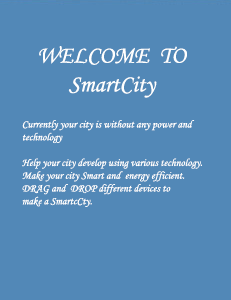
<style>
.page{position:relative;width:231px;height:300px;background:#5288b7}
.page>*{position:absolute;margin:0}
.t1{font:24px "MonotypeCorsiva";color:#fffffe}
.t2{font:10.7px "MonotypeCorsiva";color:#fffffe}
</style>
<div class="page">
<p class="t1" style="left:39px;top:46px;width:148px;height:52px">WELCOME  TO  <br>      SmartCity</p>
<p class="t2" style="left:22px;top:120px;width:180px;height:87px">Currently your city is without any power and <br>      technology  <br><br>      Help your city develop using various technology.<br>      Make your city Smart and  energy efficient.<br>      DRAG and  DROP different devices to<br>      make a SmartcCty.</p>
</div>
